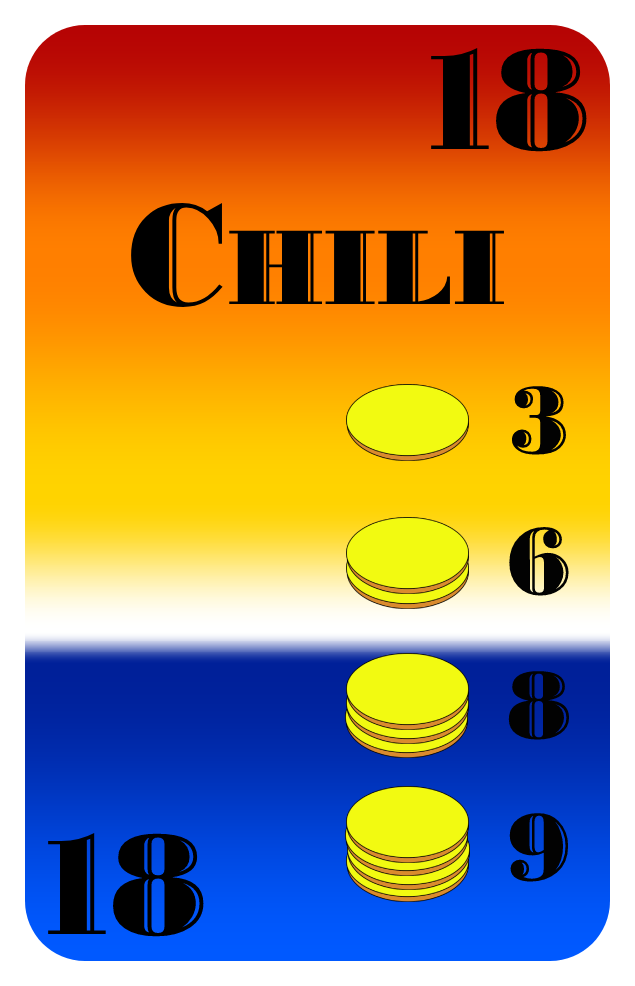
<style>
.page{position:relative;width:635px;height:986px}
.page>*{position:absolute;margin:0}
.t1{font:150px "BodoniHighlightICG";color:#000000}
.t2{font:112px "BodoniHighlightICG";color:#000000}
.t3{font:100px "BodoniHighlightICG";color:#000000}
</style>
<div class="page">
<p class="t1" style="left:431px;top:48px;width:156px;height:104px">18</p>
<p class="t2" style="left:131px;top:203px;width:373px;height:104px"><span class="t1">C</span>HILI</p>
<p class="t3" style="left:511px;top:386px;width:55px;height:69px">3</p>
<p class="t3" style="left:509px;top:527px;width:60px;height:69px">6</p>
<p class="t3" style="left:508px;top:671px;width:62px;height:69px">8</p>
<p class="t3" style="left:509px;top:813px;width:60px;height:69px">9</p>
<p class="t1" style="left:48px;top:833px;width:156px;height:104px">18</p>
</div>
